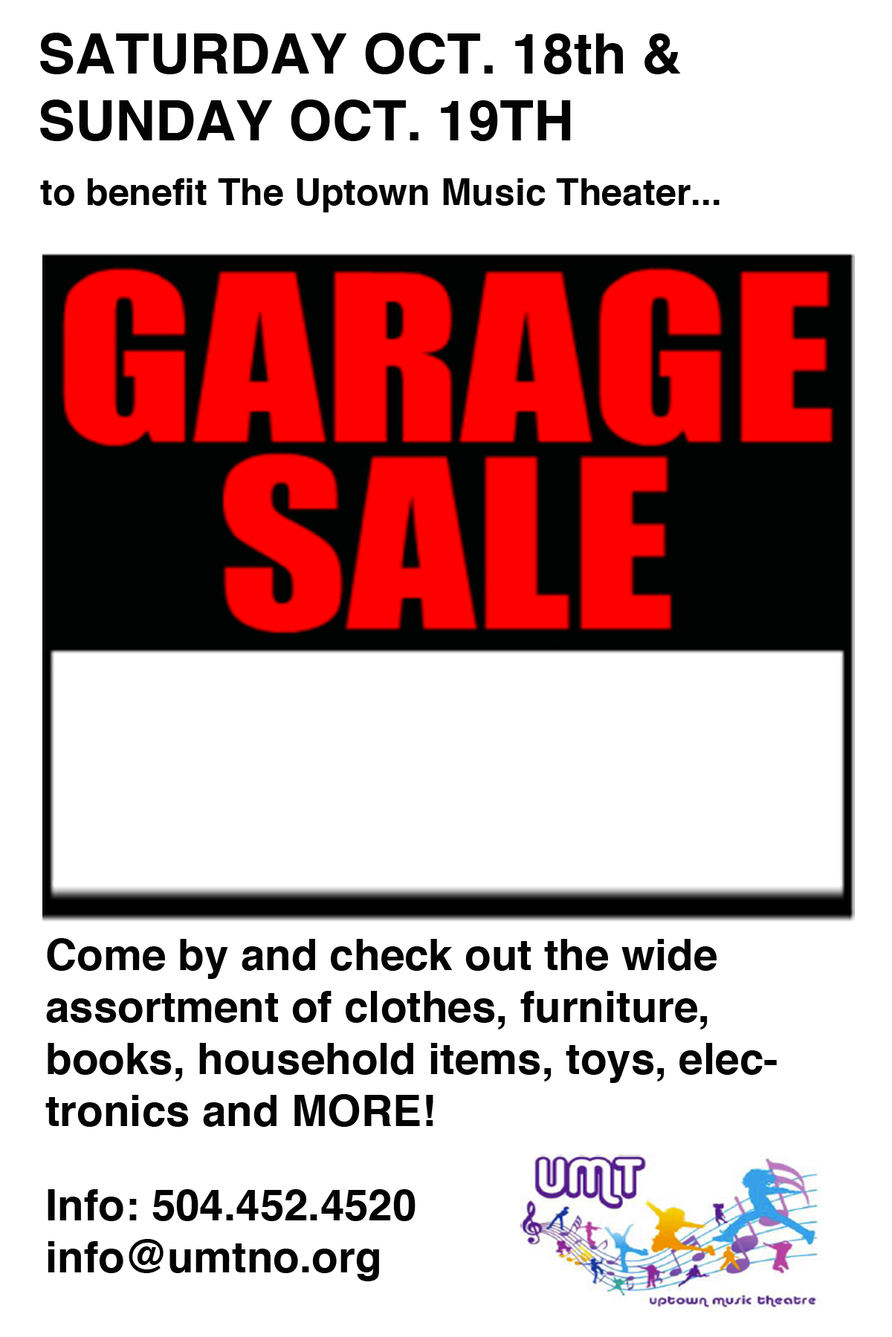
<style>
.page{position:relative;width:892px;height:1337px;background:#ffffff}
.page>*{position:absolute;margin:0}
.t1{font:55.7px "Helvetica-Bold";color:#030303}
.t2{font:37.2px "Helvetica-Bold";color:#030303}
.t3{font:43.3px "Helvetica-Bold";color:#030303}
</style>
<div class="page">
<p class="t1" style="left:40px;top:33px;width:641px;height:108px">SATURDAY OCT. 18th &amp; <br>SUNDAY OCT. 19TH</p>
<p class="t2" style="left:40px;top:178px;width:679px;height:34px">to benefit The Uptown Music Theater...</p>
<p class="t3" style="left:45px;top:938px;width:731px;height:189px">Come by and check out the wide <br>assortment of clothes, furniture, books, household items, toys, electronics and MORE!</p>
<p class="t3" style="left:48px;top:1190px;width:367px;height:92px">Info: 504.452.4520<br>info@umtno.org</p>
</div>
